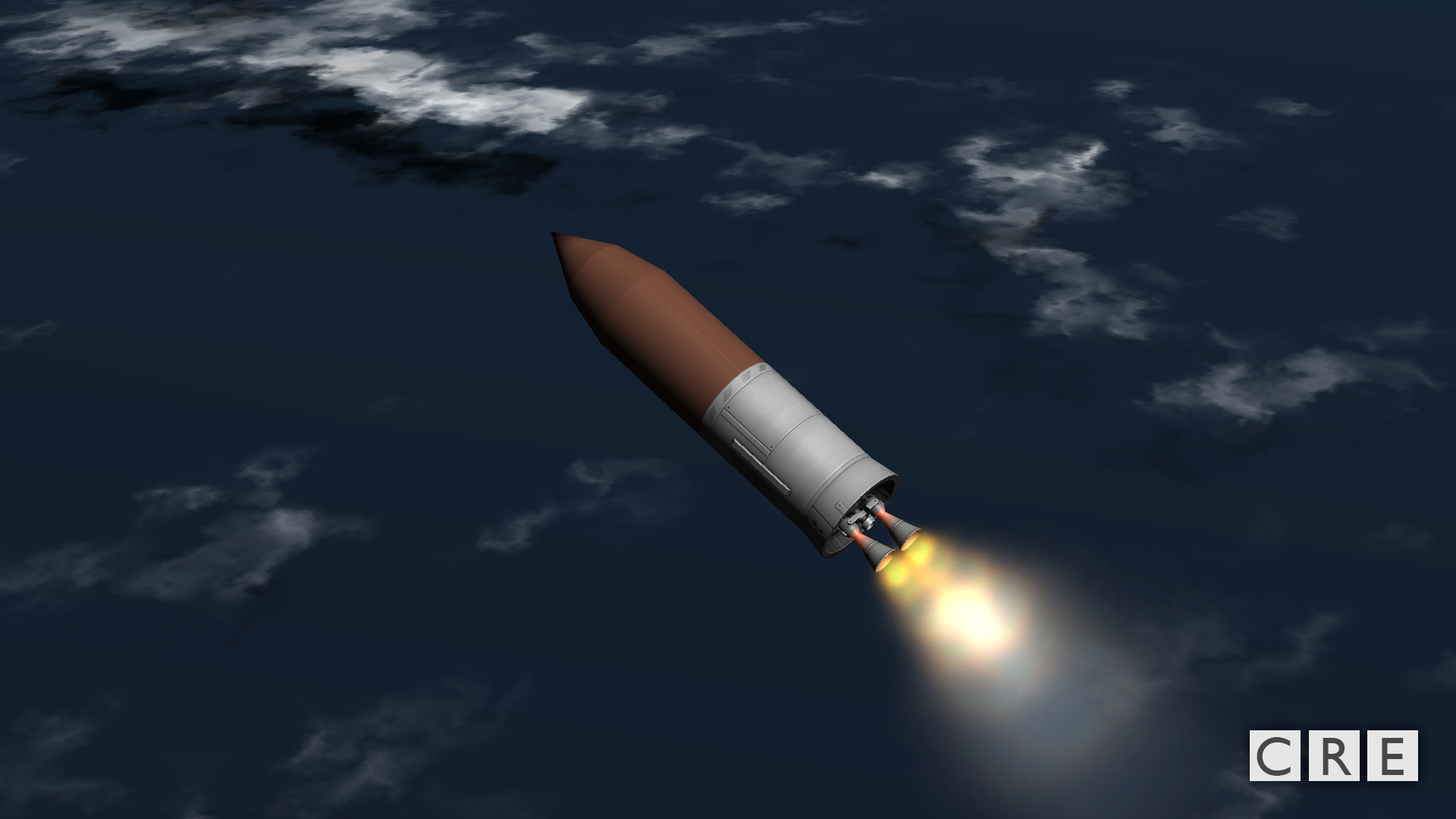
<style>
.page{position:relative;width:1456px;height:819px}
.page>*{position:absolute;margin:0}
.t1{font:54.6px "GillSansMT";letter-spacing:0.1em;color:#474747}
</style>
<div class="page">
<p class="t1" style="left:1257px;top:737px;width:147px;height:39px">C R E</p>
</div>
